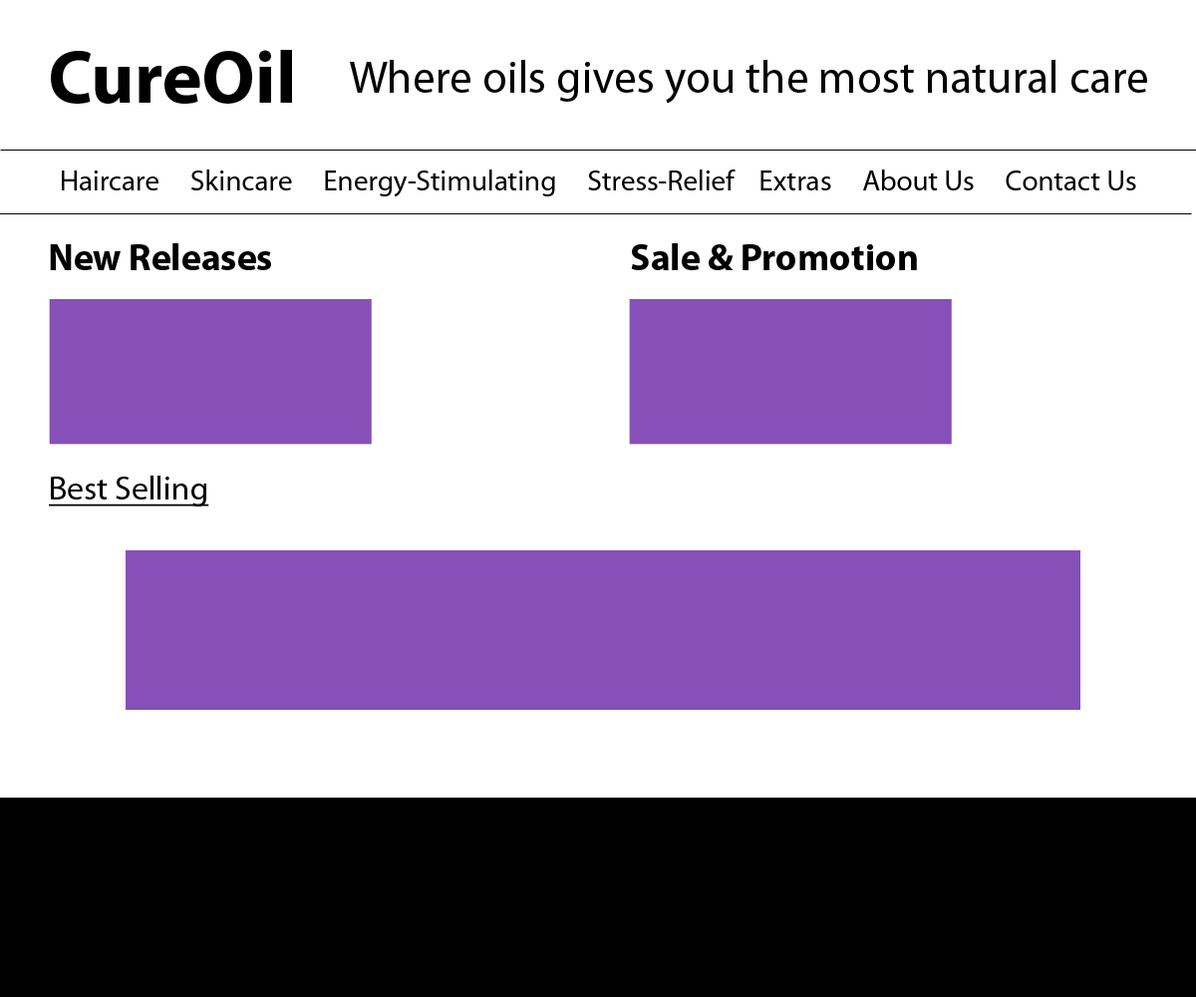
<style>
.page{position:relative;width:1196px;height:997px;background:#ffffff}
.page>*{position:absolute;margin:0}
.t1{font:74.8px "MyriadPro-Bold";color:#000000}
.t2{font:45.7px "MyriadPro-Regular";color:#000000}
.t3{font:29.1px "MyriadPro-Regular";color:#000000}
.t4{font:37.4px "MyriadPro-Bold";color:#000000}
.t5{font:33.2px "MyriadPro-Regular";color:#000000;text-decoration:underline}
</style>
<div class="page">
<p class="t1" style="left:51px;top:50px;width:241px;height:54px">CureOil</p>
<p class="t2" style="left:350px;top:60px;width:797px;height:44px">Where oils gives you the most natural care</p>
<p class="t3" style="left:62px;top:169px;width:1074px;height:27px">Haircare     Skincare     Energy-Stimulating     Stress-Relief    Extras     About Us     Contact Us</p>
<p class="t4" style="left:50px;top:243px;width:221px;height:27px">New Releases</p>
<p class="t4" style="left:631px;top:243px;width:286px;height:27px">Sale &amp; Promotion</p>
<p class="t5" style="left:49px;top:475px;width:160px;height:31px">Best Selling</p>
</div>
